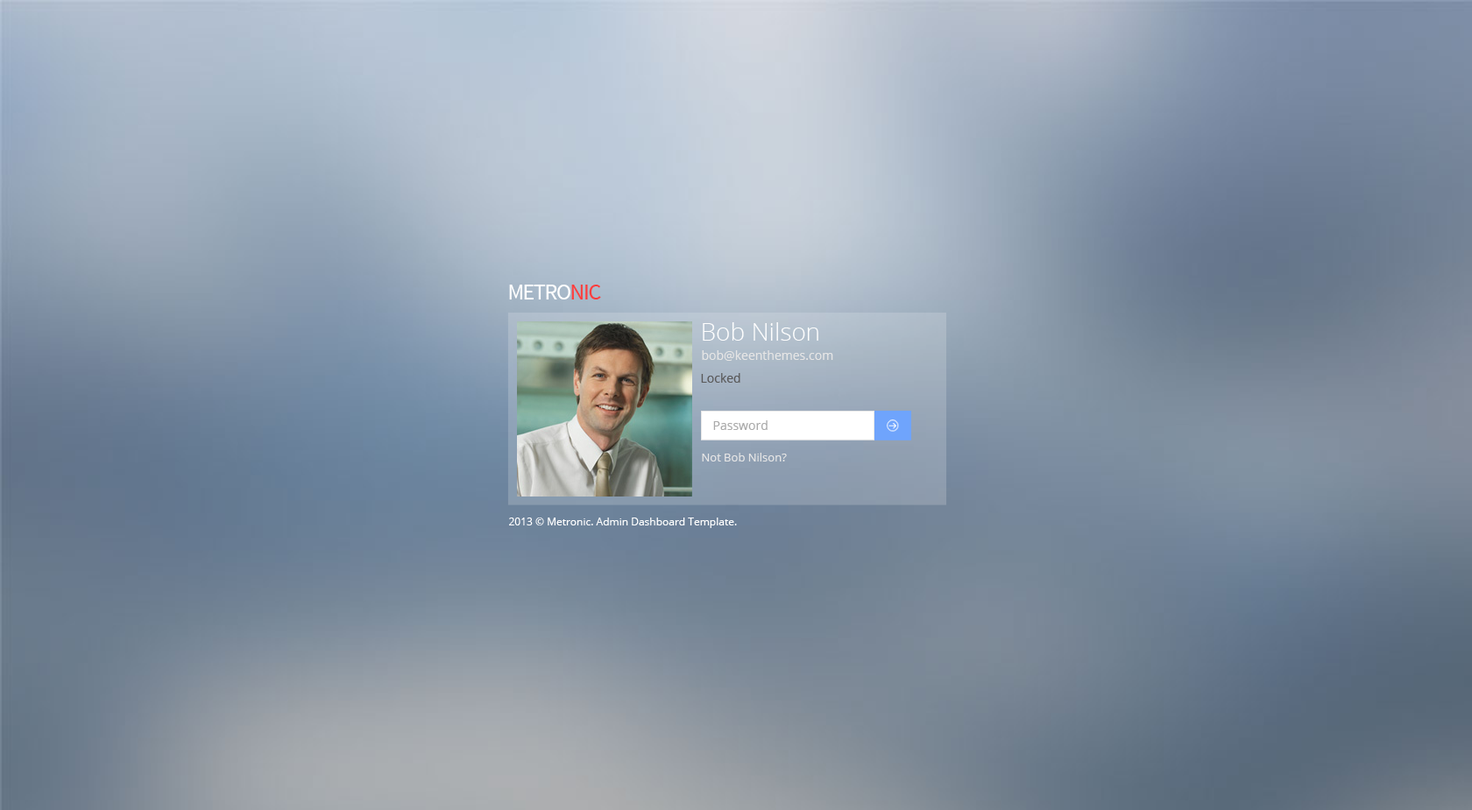
<style>
.page{position:relative;width:1472px;height:810px}
.page>*{position:absolute;margin:0}
.t1{font:22.4px "SourceSansPro-Regular";letter-spacing:-0.045em;color:#ffffff;text-transform:uppercase}
.t2{font:22.4px "SourceSansPro-Regular";letter-spacing:-0.045em;color:#ff3f3f;text-transform:uppercase}
.t3{font:24.5px "OpenSans-Light";color:#fefefe}
.t4{font:12.3px "OpenSans";color:#e5e5e5}
.t5{font:12.3px "OpenSans";color:#5a5a5a}
.t6{font:12.3px "OpenSans";color:#ababab}
.t7{font:11.4px "OpenSans";color:#e5e5e5}
.t8{font:10.5px "OpenSans";color:#ffffff}
</style>
<div class="page">
<p class="t1" style="left:509px;top:285px;width:92px;height:15px">Metro<span class="t2">nic</span></p>
<p class="t3" style="left:703px;top:322px;width:115px;height:19px">Bob Nilson</p>
<p class="t4" style="left:702px;top:350px;width:131px;height:11px">bob@keenthemes.com</p>
<p class="t5" style="left:701px;top:373px;width:39px;height:10px">Locked</p>
<p class="t6" style="left:713px;top:420px;width:54px;height:10px">Password</p>
<p class="t7" style="left:702px;top:453px;width:85px;height:9px">Not Bob Nilson?</p>
<p class="t8" style="left:509px;top:518px;width:228px;height:10px">2013 © Metronic. Admin Dashboard Template.</p>
</div>
